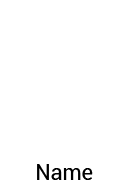
<style>
.page{position:relative;width:128px;height:180px;background:#ffffff}
.page>*{position:absolute;margin:0}
.t1{font:21.7px "Roboto-Regular";color:#000000}
</style>
<div class="page">
<p class="t1" style="left:37px;top:164px;width:56px;height:16px">Name</p>
</div>
